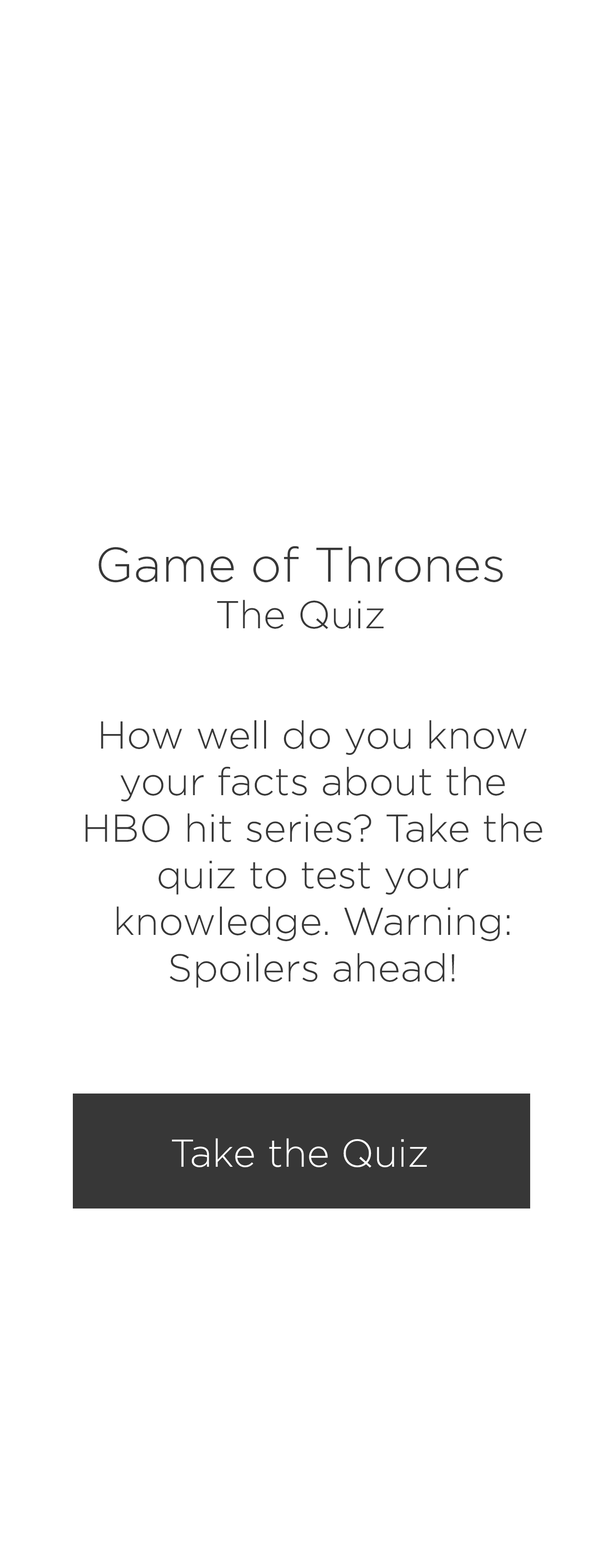
<style>
.page{position:relative;width:603px;height:1568px;background:#ffffff}
.page>*{position:absolute;margin:0}
.t1{font:48.5px "Gotham-Light";color:#373737}
.t2{font:38.8px "Gotham-Light";color:#373737}
.t3{font:38.8px "Gotham-Light";color:#ffffff}
</style>
<div class="page">
<p class="t1" style="left:98px;top:546px;width:405px;height:83px;text-align:center">Game of Thrones<br><span class="t2">The Quiz</span></p>
<p class="t2" style="left:85px;top:720px;width:457px;height:268px;text-align:center">How well do you know your facts about the HBO hit series? Take the quiz to test your knowledge. Warning: Spoilers ahead!</p>
<p class="t3" style="left:172px;top:1138px;width:254px;height:30px">Take the Quiz</p>
</div>
